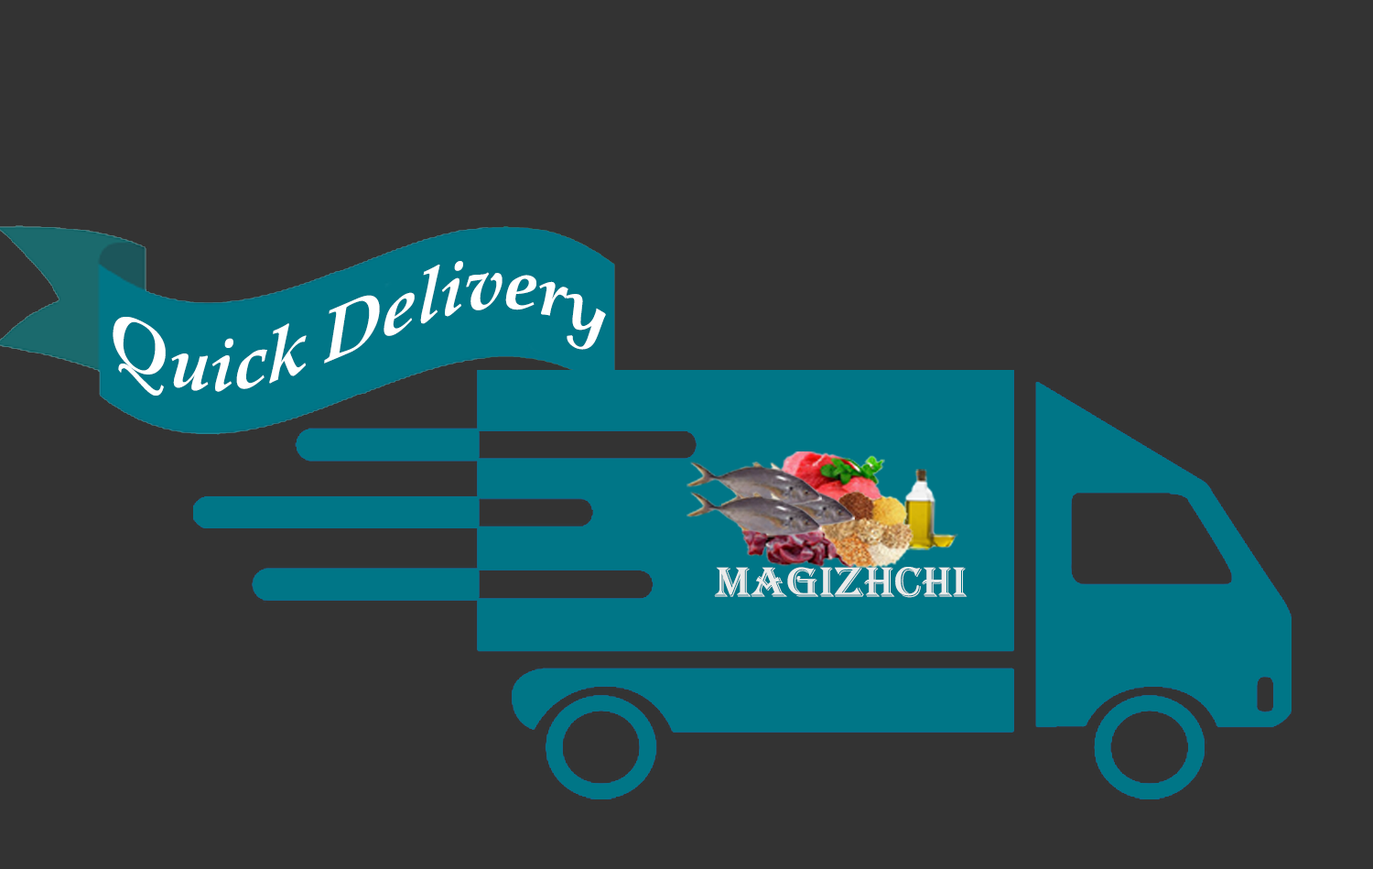
<style>
.page{position:relative;width:1373px;height:869px;background:#333333}
.page>*{position:absolute;margin:0}
.t1{font:73.2px "BookAntiqua-BoldItalic";color:#ffffff}
.t2{font:43.3px "Algerian";color:#ebebea;scale:1.1 1}
</style>
<div class="page">
<p class="t1" style="left:113px;top:261px;width:493px;height:134px">Quick Delivery</p>
<p class="t2" style="left:714px;top:567px;width:253px;height:31px">Magizhchi</p>
</div>
